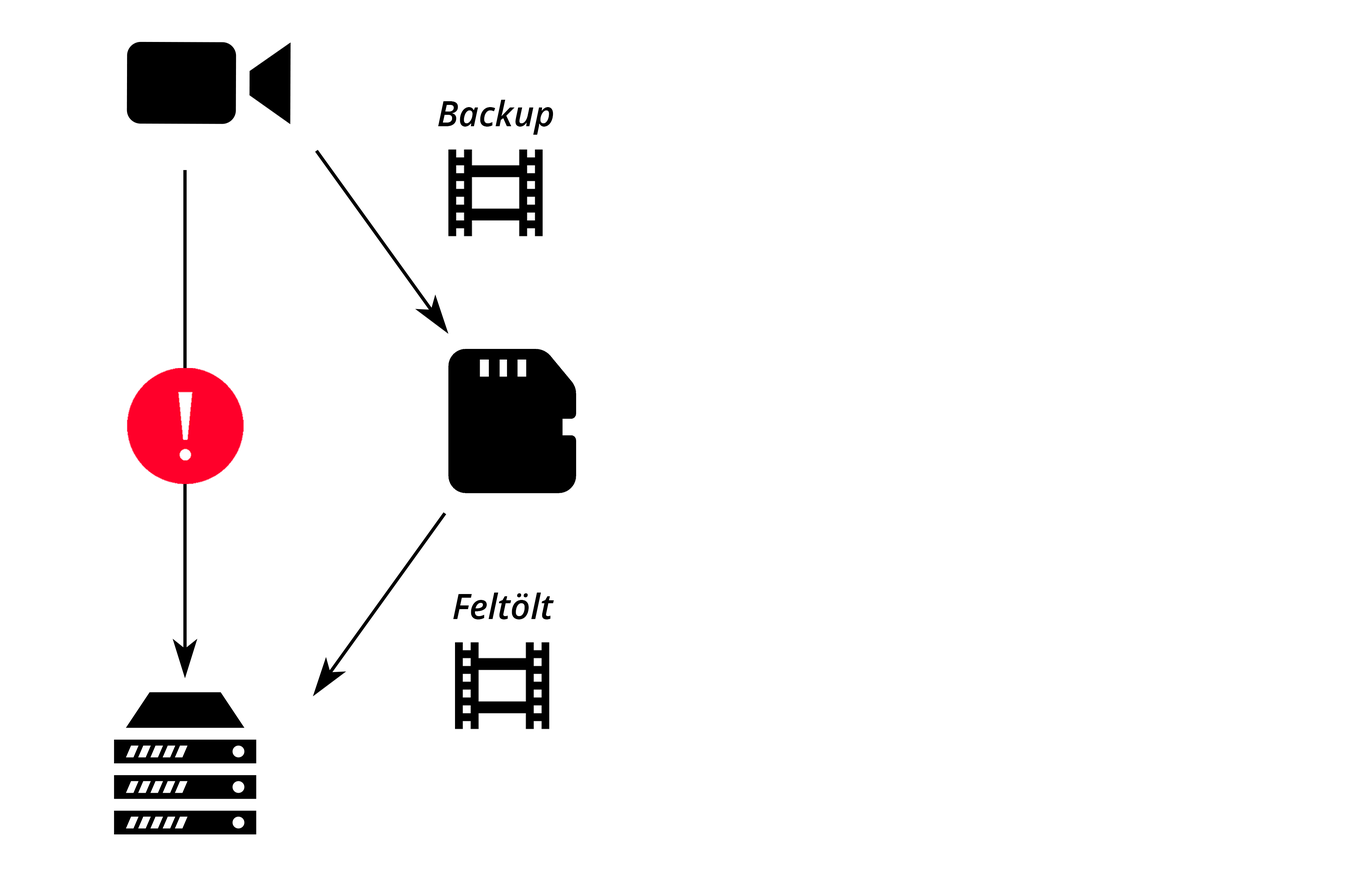
<style>
.page{position:relative;width:1354px;height:880px;background:#ffffff}
.page>*{position:absolute;margin:0}
.t1{font:35px "OpenSans-SemiBoldItalic";color:#000000}
</style>
<div class="page">
<p class="t1" style="left:438px;top:100px;width:115px;height:35px">Backup</p>
<p class="t1" style="left:453px;top:593px;width:101px;height:27px">Feltölt</p>
</div>
